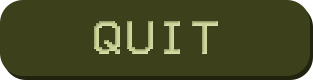
<style>
.page{position:relative;width:313px;height:80px;background:#3c401b}
.page>*{position:absolute;margin:0}
.t1{font:48px "VCROSDMono";letter-spacing:0.01em;color:#cad193;scale:1.13 1}
</style>
<div class="page">
<p class="t1" style="left:94px;top:21px;width:124px;height:33px">QUIT</p>
</div>
